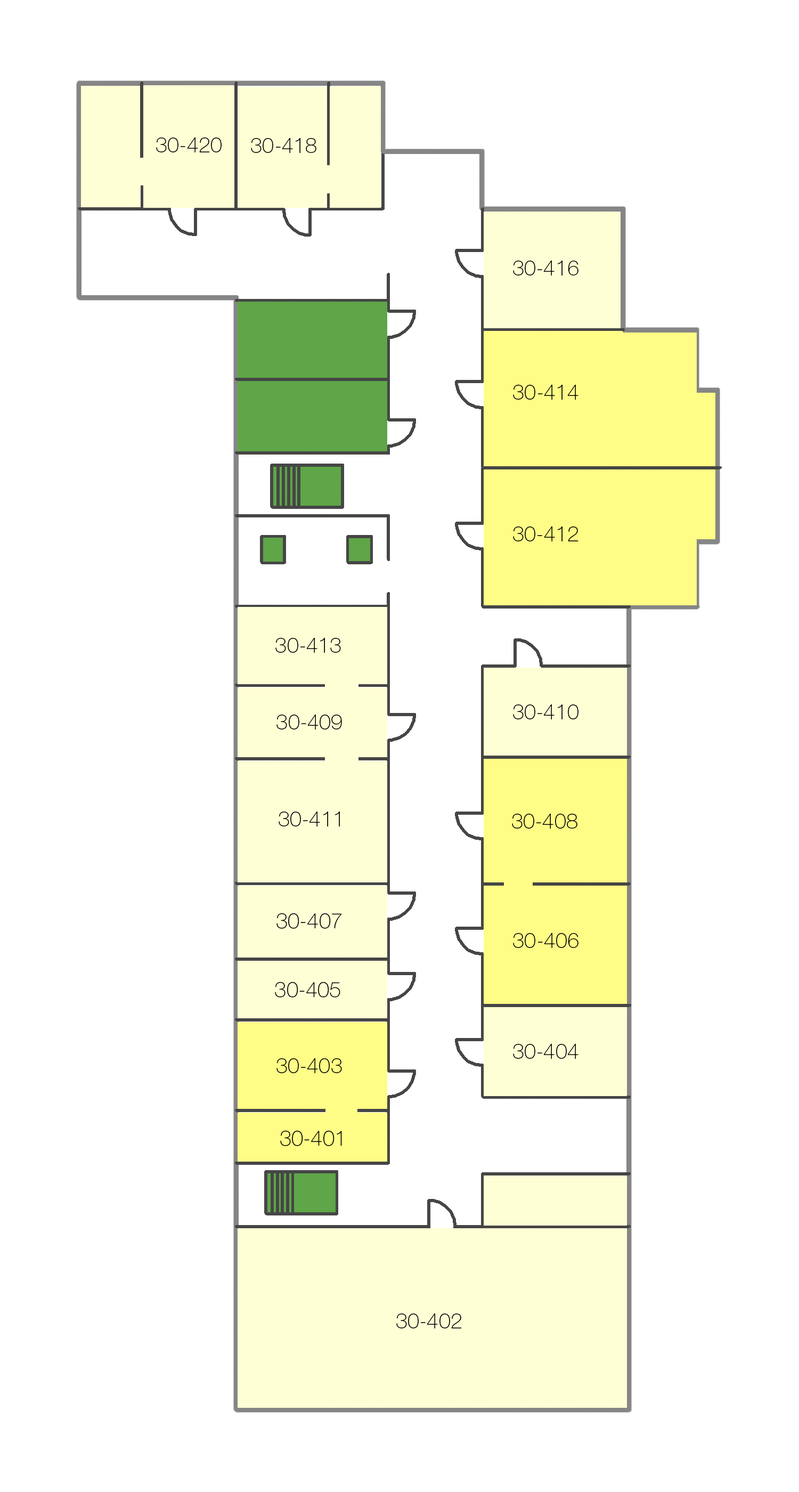
<style>
.page{position:relative;width:799px;height:1492px;background:#ffffff}
.page>*{position:absolute;margin:0}
.t1{font:21.3px "HelveticaNeueCyr-Thin";color:#000000;font-variant:small-caps}
</style>
<div class="page">
<p class="t1" style="left:156px;top:137px;width:66px;height:15px">30-420</p>
<p class="t1" style="left:251px;top:138px;width:66px;height:15px">30-418</p>
<p class="t1" style="left:513px;top:261px;width:66px;height:14px">30-416</p>
<p class="t1" style="left:513px;top:385px;width:66px;height:15px">30-414</p>
<p class="t1" style="left:513px;top:526px;width:66px;height:15px">30-412</p>
<p class="t1" style="left:275px;top:638px;width:66px;height:15px">30-413</p>
<p class="t1" style="left:513px;top:704px;width:66px;height:15px">30-410</p>
<p class="t1" style="left:277px;top:715px;width:65px;height:14px">30-409</p>
<p class="t1" style="left:279px;top:812px;width:61px;height:14px">30-411</p>
<p class="t1" style="left:512px;top:814px;width:66px;height:15px">30-408</p>
<p class="t1" style="left:277px;top:913px;width:65px;height:16px">30-407</p>
<p class="t1" style="left:513px;top:933px;width:66px;height:15px">30-406</p>
<p class="t1" style="left:275px;top:981px;width:65px;height:16px">30-405</p>
<p class="t1" style="left:513px;top:1044px;width:66px;height:15px">30-404</p>
<p class="t1" style="left:277px;top:1058px;width:65px;height:15px">30-403</p>
<p class="t1" style="left:280px;top:1130px;width:62px;height:16px">30-401</p>
<p class="t1" style="left:396px;top:1313px;width:66px;height:15px">30-402</p>
</div>
